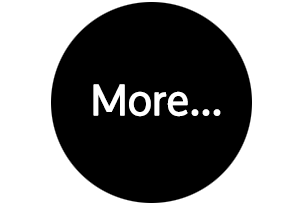
<style>
.page{position:relative;width:305px;height:205px;background:#ffffff}
.page>*{position:absolute;margin:0}
.t1{font:41px "Oxygen";color:#ffffff;font-weight:bold}
</style>
<div class="page">
<p class="t1" style="left:93px;top:84px;width:128px;height:33px">More...</p>
</div>
